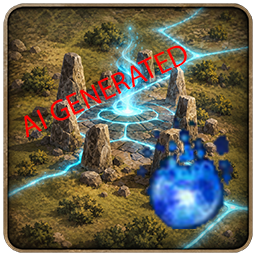
<style>
.page{position:relative;width:256px;height:256px}
.page>*{position:absolute;margin:0}
.t1{font:30px "MyriadPro-Regular";color:#ff0000}
</style>
<div class="page">
<p class="t1" style="left:24px;top:45px;width:163px;height:93px;rotate:-25deg">AI GENERATED</p>
</div>
